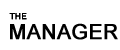
<style>
.page{position:relative;width:120px;height:50px;background:#ffffff}
.page>*{position:absolute;margin:0}
.t1{font:8.3px "ArialMT";letter-spacing:0.005em;color:#000000;font-weight:bold}
.t2{font:20.8px "ArialMT";letter-spacing:0.005em;color:#000000;font-weight:bold}
</style>
<div class="page">
<p class="t1" style="left:9px;top:13px;width:18px;height:7px">THE</p>
<p class="t2" style="left:10px;top:23px;width:108px;height:17px">MANAGER</p>
</div>
